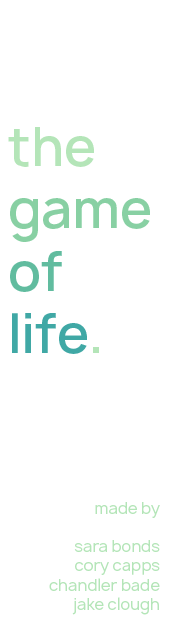
<style>
.page{position:relative;width:170px;height:630px;background:#ffffff}
.page>*{position:absolute;margin:0}
.t1{font:16px "Manrope-Regular";color:#b4e5b8}
.t2{font:52px "Manrope-Semibold";color:#ffffff}
.t3{font:52px "Manrope-Semibold";color:#b4e5b8}
.t4{font:52px "Manrope-Semibold";letter-spacing:-0.01em;color:#88d0a3}
.t5{font:52px "Manrope-Semibold";color:#88d0a3}
.t6{font:52px "Manrope-Semibold";color:#61bc9f}
.t7{font:52px "Manrope-Semibold";color:#40a8a5}
.t8{font:52px "Manrope-Semibold";letter-spacing:-0.005em;color:#40a8a5}
.t9{font:52px "Manrope-Semibold";letter-spacing:0.025em;color:#40a8a5}
</style>
<div class="page">
<p class="t1" style="left:8px;top:127px;width:152px;height:488px"><span class="t2"><br><br></span><span class="t3">the<br></span><span class="t4">g</span><span class="t5">ame<br></span><span class="t6">of<br></span><span class="t7">l</span><span class="t8">i</span><span class="t9">f</span><span class="t7">e</span><span class="t3">.<br><br><br><br><br><br></span>made by<br><br>sara bonds<br>cory capps<br>chandler bade<br>jake clough</p>
</div>
